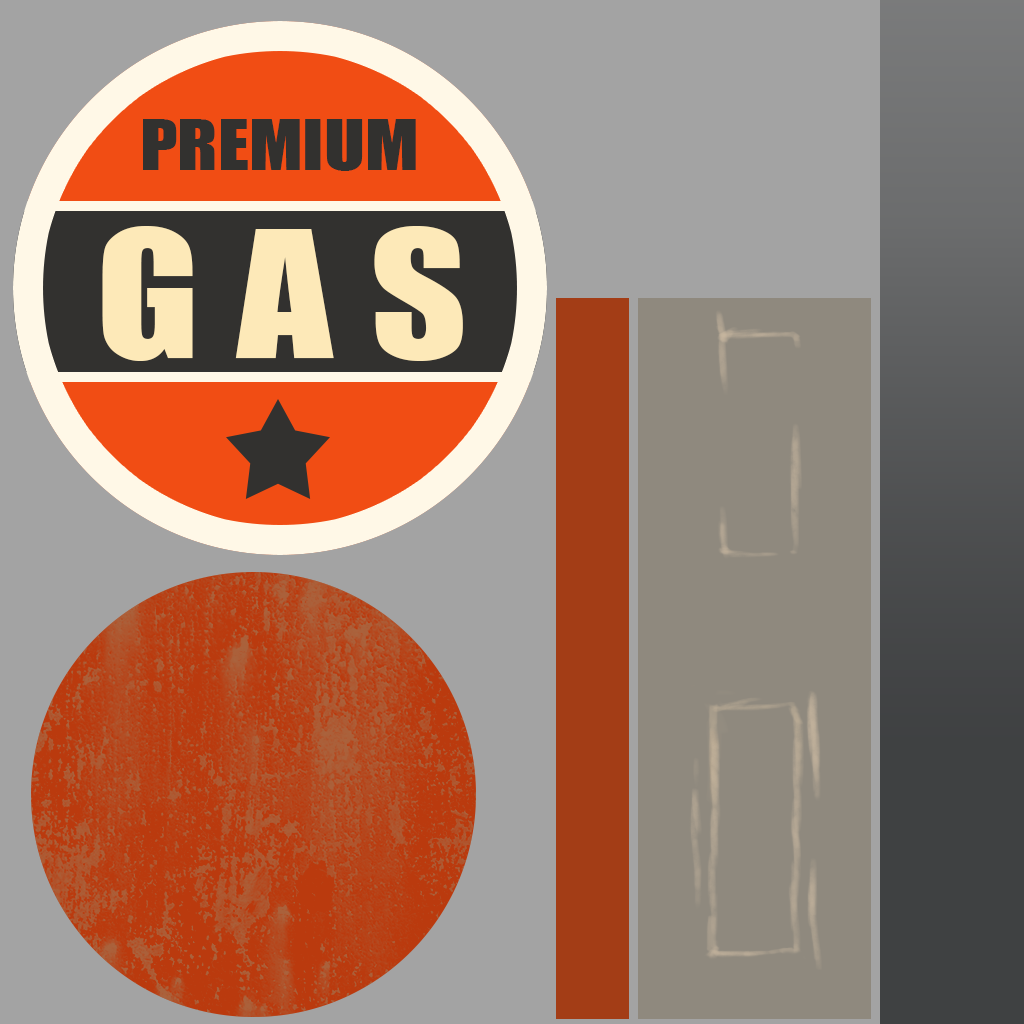
<style>
.page{position:relative;width:1024px;height:1024px;background:#a3a3a3}
.page>*{position:absolute;margin:0}
.t1{font:65.1px "Impact";color:#32312f;scale:1.15 1}
.t2{font:163.1px "Impact";letter-spacing:0.2em;color:#fde9b8;scale:1.15 1}
</style>
<div class="page">
<p class="t1" style="left:143px;top:119px;width:273px;height:52px">PREMIUM</p>
<p class="t2" style="left:102px;top:226px;width:361px;height:135px">GAS</p>
</div>
